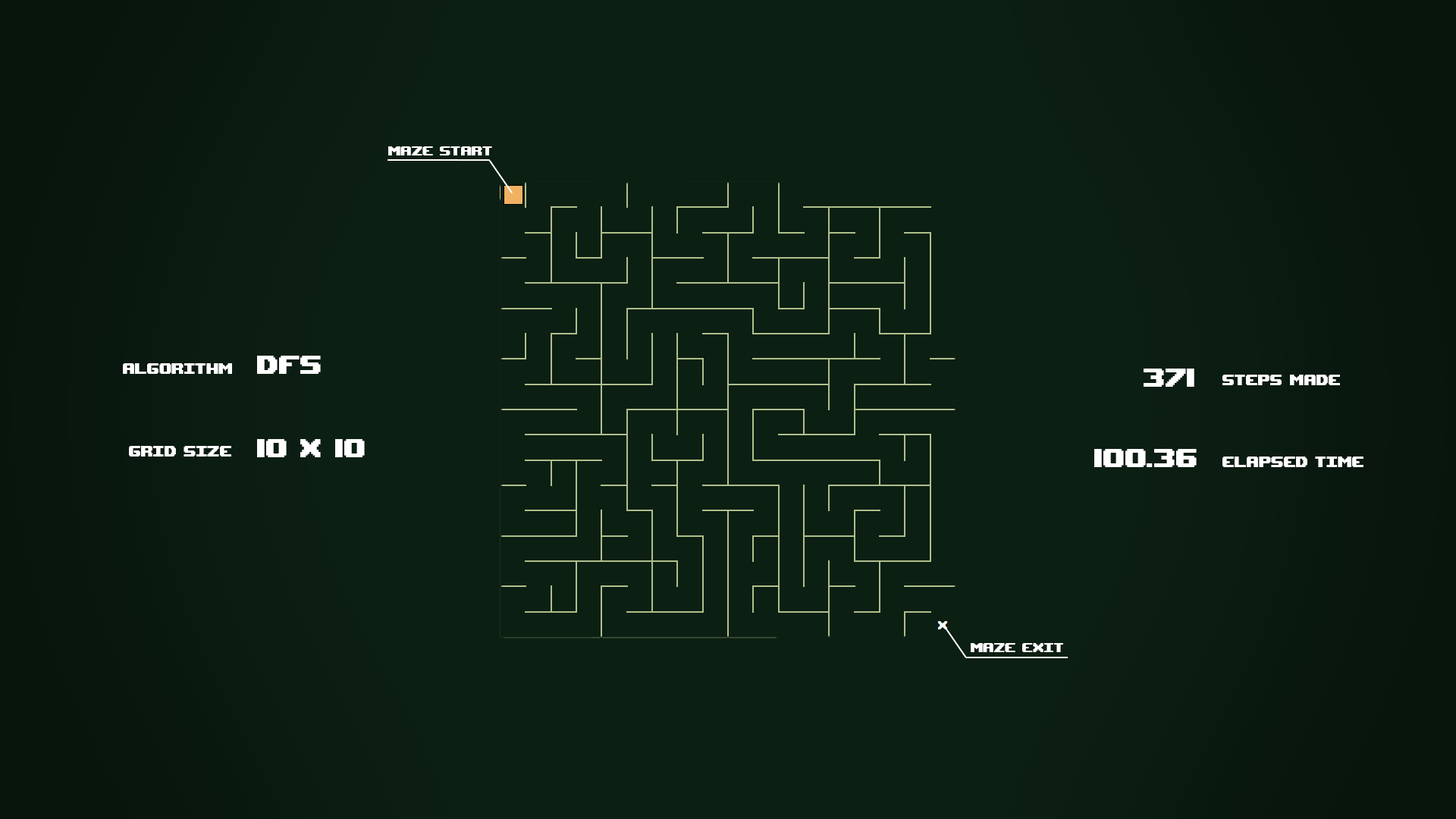
<style>
.page{position:relative;width:1456px;height:819px;background:#0c1f13}
.page>*{position:absolute;margin:0}
.t1{font:18.2px "UpheavalTT-BRK-";color:#ffffff}
.t2{font:20.5px "UpheavalTT-BRK-";color:#ffffff}
.t3{font:36.4px "UpheavalTT-BRK-";color:#ffffff}
</style>
<div class="page">
<p class="t1" style="left:388px;top:146px;width:104px;height:9px">Maze start</p>
<p class="t2" style="left:123px;top:363px;width:109px;height:11px">Algorithm</p>
<p class="t3" style="left:257px;top:356px;width:64px;height:18px">DFS</p>
<p class="t3" style="left:1144px;top:369px;width:50px;height:18px">371</p>
<p class="t2" style="left:1222px;top:375px;width:118px;height:10px">Steps Made</p>
<p class="t2" style="left:129px;top:446px;width:102px;height:11px">Grid size</p>
<p class="t3" style="left:257px;top:439px;width:108px;height:18px">10 x 10</p>
<p class="t3" style="left:1094px;top:449px;width:103px;height:18px">100.36</p>
<p class="t2" style="left:1222px;top:457px;width:141px;height:10px">Elapsed Time</p>
<p class="t1" style="left:971px;top:643px;width:92px;height:9px">Maze Exit</p>
</div>
